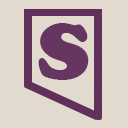
<style>
.page{position:relative;width:128px;height:128px;background:#e3dacf}
.page>*{position:absolute;margin:0}
.t1{font:82px "CooperBlack";color:#663560}
</style>
<div class="page">
<p class="t1" style="left:38px;top:23px;width:51px;height:57px">S</p>
</div>
